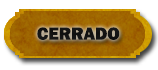
<style>
.page{position:relative;width:158px;height:70px;background:#ffffff}
.page>*{position:absolute;margin:0}
.t1{font:18px "FranklinGothic-Heavy";color:#1d1d1d}
</style>
<div class="page">
<p class="t1" style="left:37px;top:27px;width:83px;height:13px">CERRADO</p>
</div>
